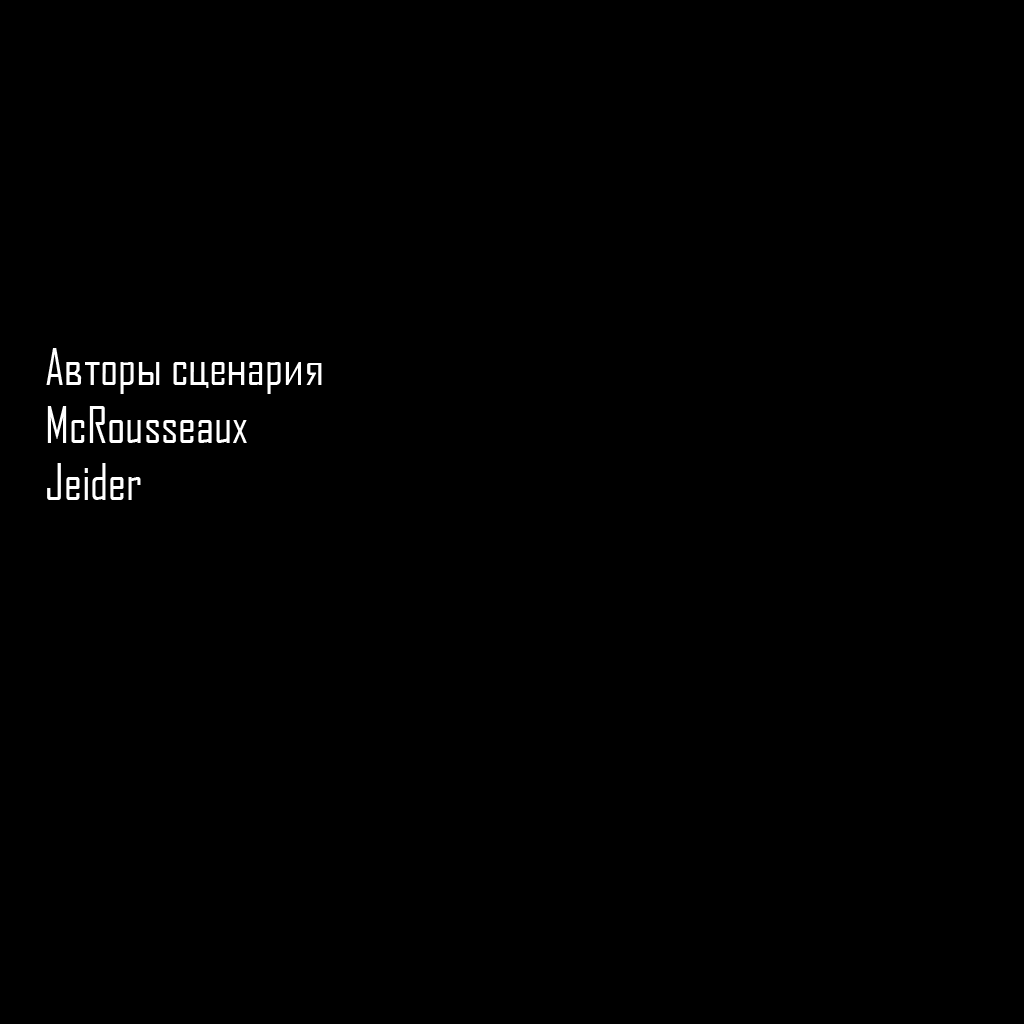
<style>
.page{position:relative;width:1024px;height:1024px;background:#000000}
.page>*{position:absolute;margin:0}
.t1{font:48px "AgencyFBCyrillic";color:#ffffff}
</style>
<div class="page">
<p class="t1" style="left:46px;top:348px;width:276px;height:152px">Авторы сценария<br>McRousseaux<br>Jeider</p>
</div>
